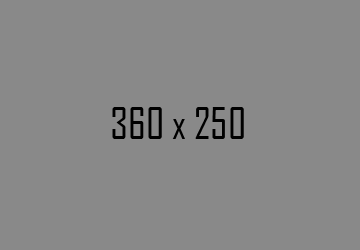
<style>
.page{position:relative;width:360px;height:250px;background:#898989}
.page>*{position:absolute;margin:0}
.t1{font:42px "AgencyFB-Reg";color:#000000}
</style>
<div class="page">
<p class="t1" style="left:112px;top:107px;width:132px;height:32px">360 x 250</p>
</div>
